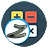
<style>
.page{position:relative;width:48px;height:48px;background:#ffffff}
.page>*{position:absolute;margin:0}
.t1{font:16.7px "Consolas-Italic";scale:0.95 1}
</style>
<div class="page">
<p class="t1" style="left:7px;top:25px;width:20px;height:13px;rotate:178deg">Z</p>
</div>
